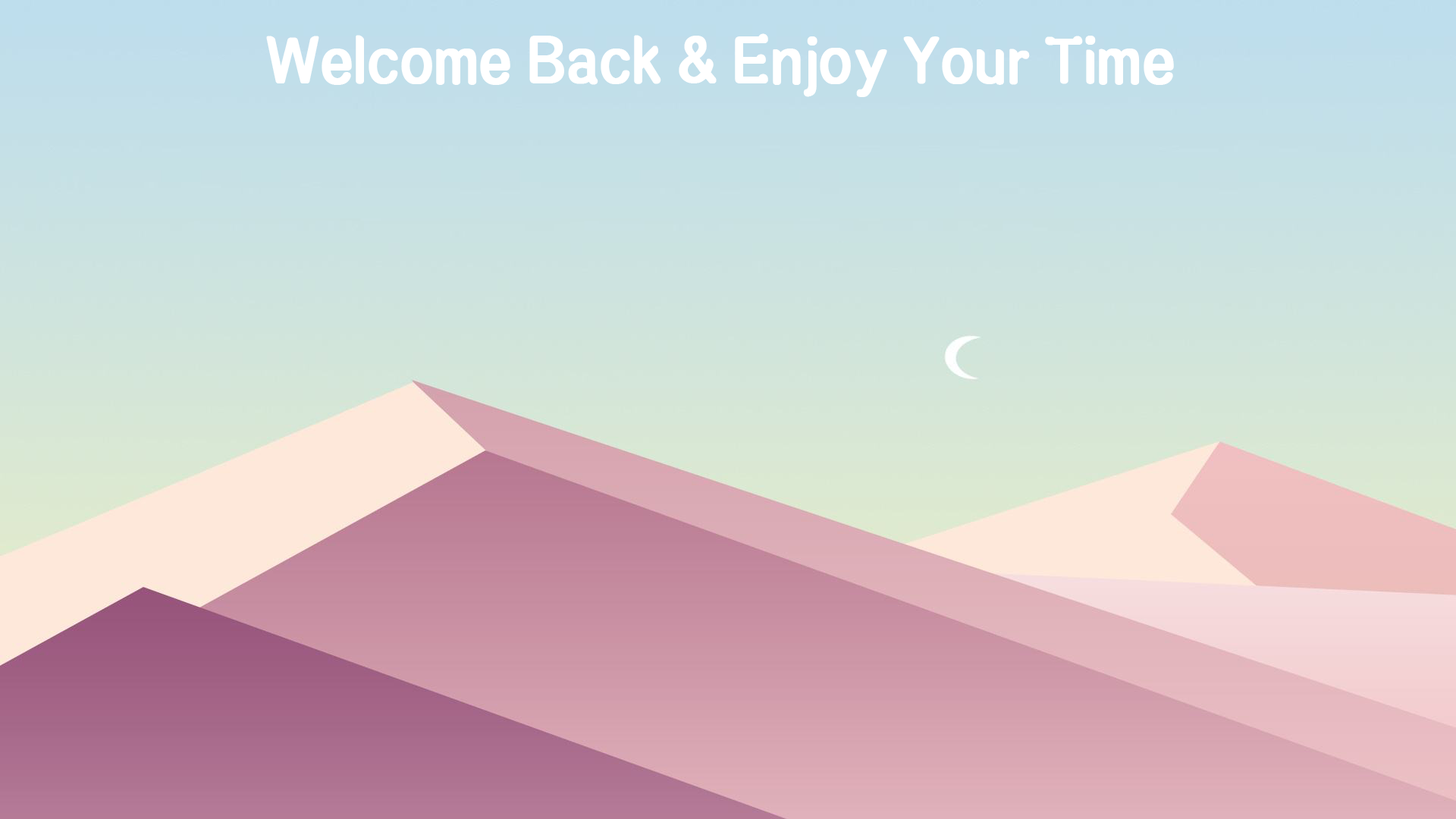
<style>
.page{position:relative;width:1456px;height:819px}
.page>*{position:absolute;margin:0}
.t1{font:54.6px "MF-PuYue(Noncommercial)-Regular";color:#ffffff;font-weight:bold}
</style>
<div class="page">
<p class="t1" style="left:266px;top:33px;width:908px;height:64px">Welcome Back &amp; Enjoy Your Time</p>
</div>
